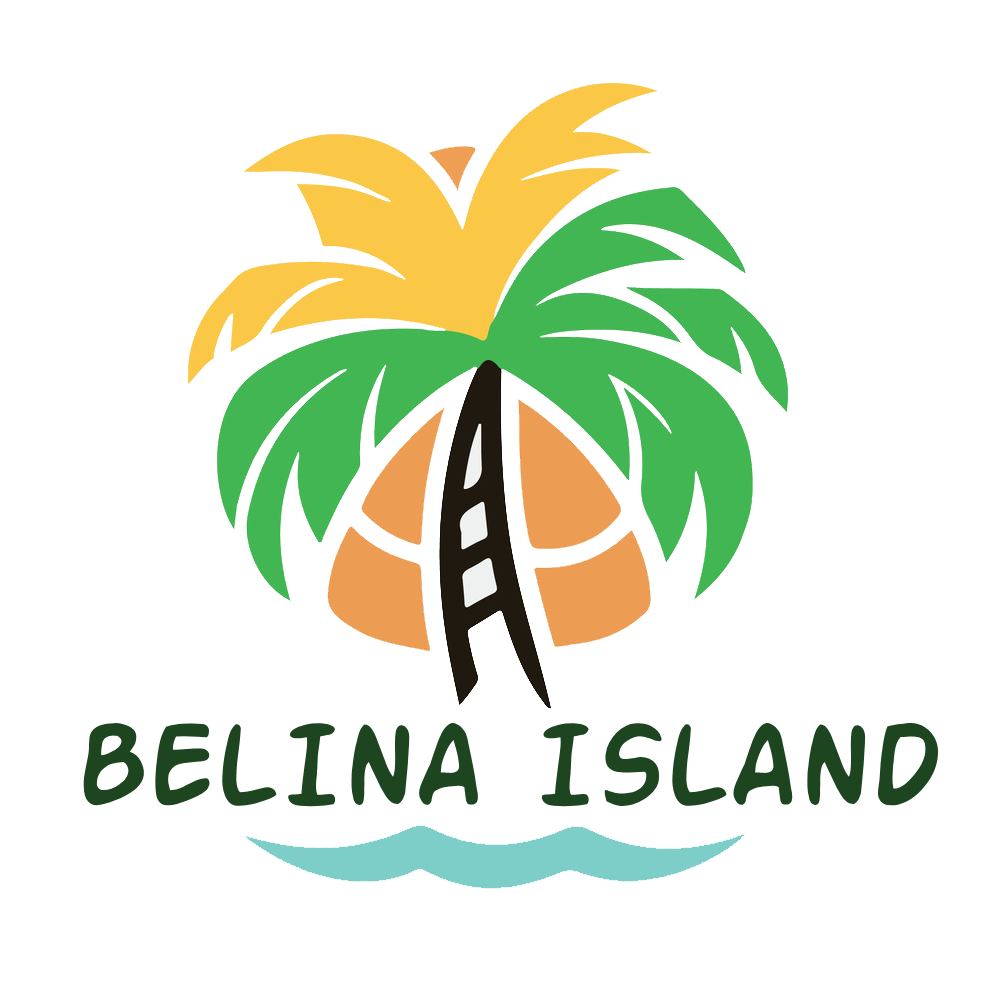
<style>
.page{position:relative;width:994px;height:994px;background:#ffffff}
.page>*{position:absolute;margin:0}
.t1{font:127px "ActionMan";color:#1d4520}
</style>
<div class="page">
<p class="t1" style="left:83px;top:722px;width:856px;height:85px">BELINA ISLAND</p>
</div>
